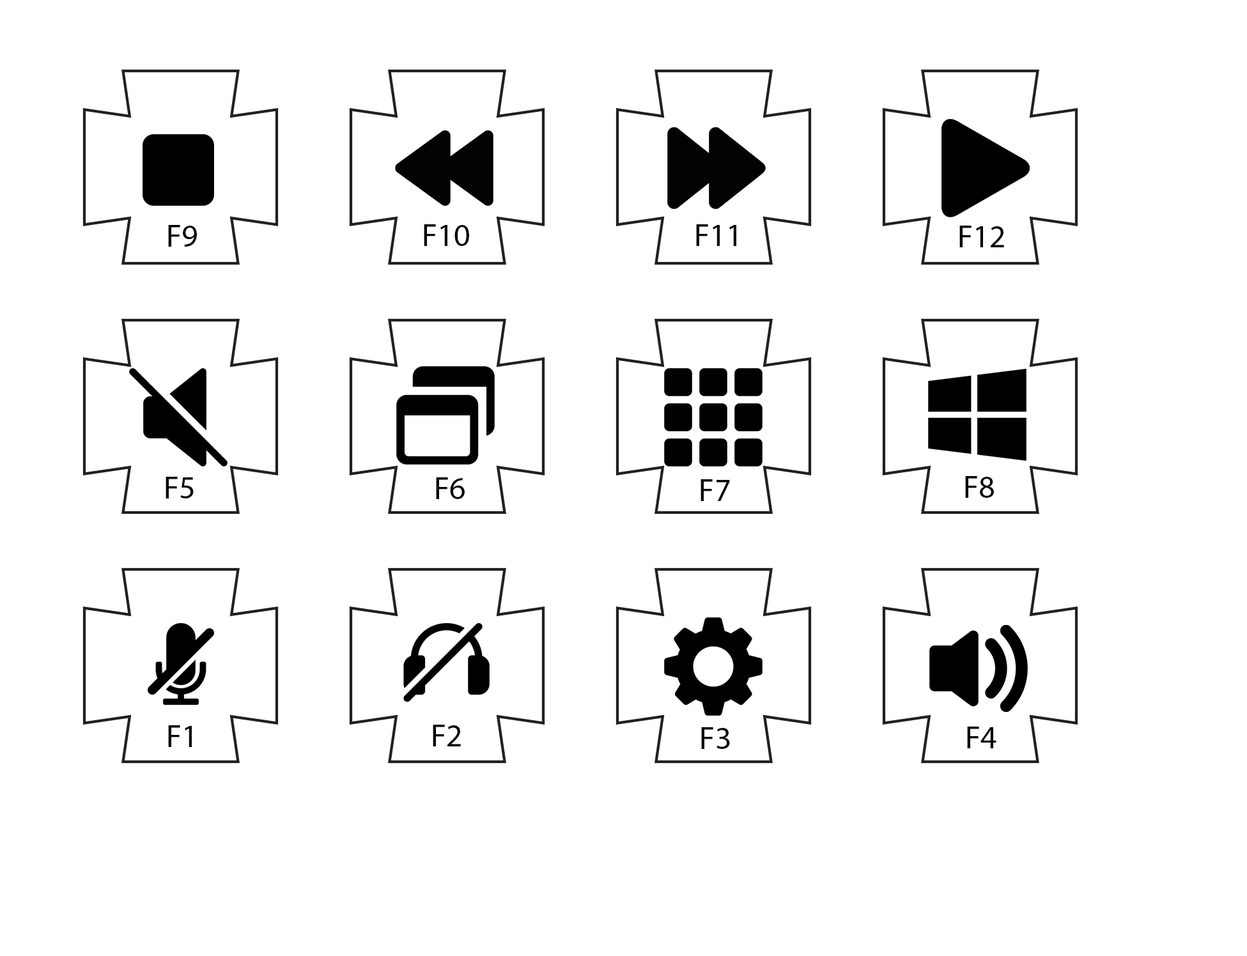
<style>
.page{position:relative;width:1247px;height:956px;background:#ffffff}
.page>*{position:absolute;margin:0}
.t1{font:32px "MyriadPro-Regular";color:#000000}
</style>
<div class="page">
<p class="t1" style="left:168px;top:225px;width:29px;height:22px">F9</p>
<p class="t1" style="left:424px;top:224px;width:45px;height:22px">F10</p>
<p class="t1" style="left:696px;top:224px;width:40px;height:22px">F11</p>
<p class="t1" style="left:959px;top:226px;width:45px;height:21px">F12</p>
<p class="t1" style="left:166px;top:477px;width:28px;height:22px">F5</p>
<p class="t1" style="left:436px;top:477px;width:29px;height:22px">F6</p>
<p class="t1" style="left:701px;top:479px;width:29px;height:22px">F7</p>
<p class="t1" style="left:965px;top:476px;width:29px;height:22px">F8</p>
<p class="t1" style="left:168px;top:725px;width:24px;height:22px">F1</p>
<p class="t1" style="left:433px;top:725px;width:28px;height:22px">F2</p>
<p class="t1" style="left:701px;top:727px;width:29px;height:22px">F3</p>
<p class="t1" style="left:967px;top:727px;width:29px;height:21px">F4</p>
</div>
